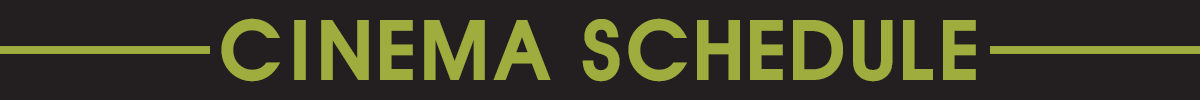
<style>
.page{position:relative;width:1200px;height:100px;background:#231f20}
.page>*{position:absolute;margin:0}
.t1{font:80px "HYtbrB";color:#9fad3e}
</style>
<div class="page">
<p class="t1" style="left:221px;top:18px;width:755px;height:64px">CINEMA SCHEDULE</p>
</div>
